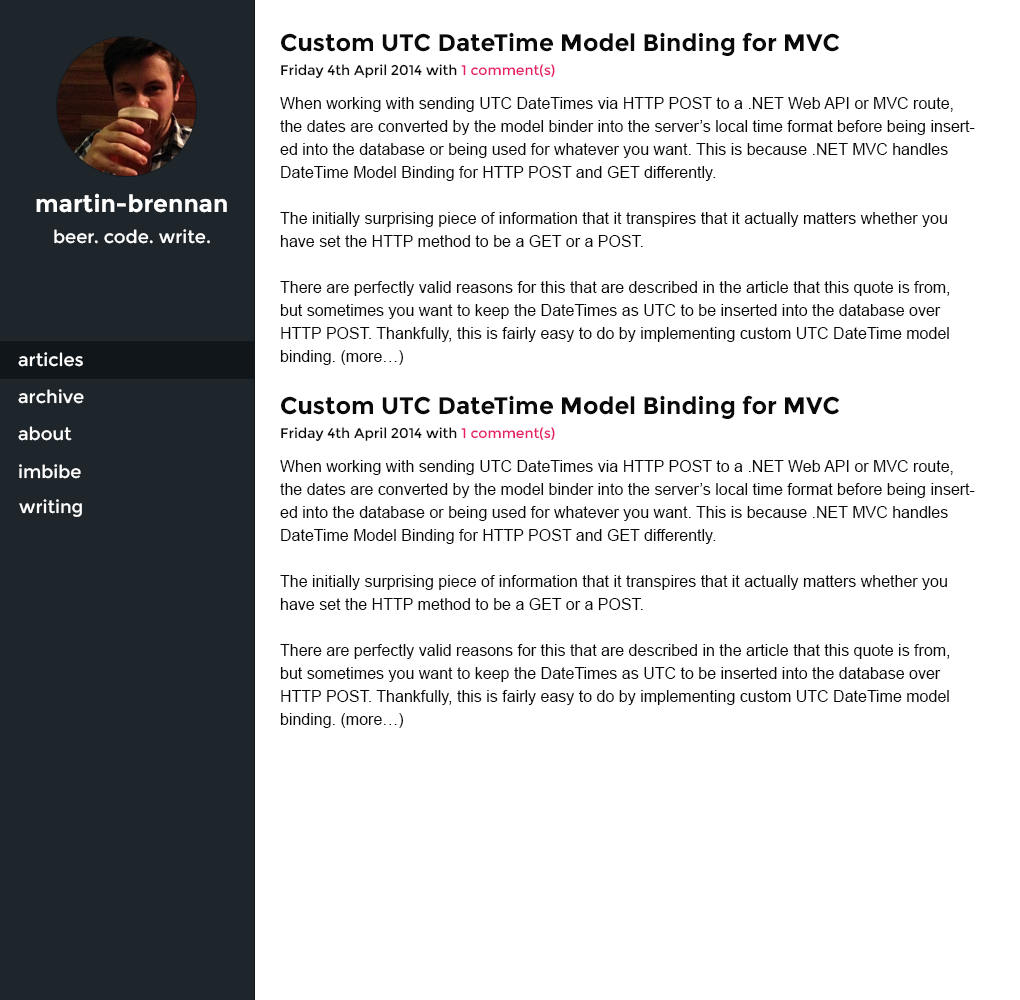
<style>
.page{position:relative;width:1020px;height:1000px;background:#ffffff}
.page>*{position:absolute;margin:0}
.t1{font:24px "Montserrat-Bold";color:#0a0a0a}
.t2{font:14px "Montserrat-Regular";color:#0a0a0a}
.t3{font:14px "Montserrat-Regular";color:#e52066}
.t4{font:16px/23px "ArialMT";color:#0a0a0a}
.t5{font:24px "Montserrat-Bold";color:#ffffff}
.t6{font:18px "Montserrat-Regular";color:#ffffff}
</style>
<div class="page">
<p class="t1" style="left:281px;top:32px;width:559px;height:24px">Custom UTC DateTime Model Binding for MVC</p>
<p class="t2" style="left:281px;top:64px;width:274px;height:15px">Friday 4th April 2014 with <span class="t3">1 comment(s)</span></p>
<p class="t4" style="left:280px;top:97px;width:695px;height:268px">When working with sending UTC DateTimes via HTTP POST to a .NET Web API or MVC route, the dates are converted by the model binder into the server’s local time format before being inserted into the database or being used for whatever you want. This is because .NET MVC handles DateTime Model Binding for HTTP POST and GET differently.<br><br>The initially surprising piece of information that it transpires that it actually matters whether you have set the HTTP method to be a GET or a POST.<br><br>There are perfectly valid reasons for this that are described in the article that this quote is from, but sometimes you want to keep the DateTimes as UTC to be inserted into the database over HTTP POST. Thankfully, this is fairly easy to do by implementing custom UTC DateTime model binding. (more…)</p>
<p class="t5" style="left:36px;top:193px;width:191px;height:20px">martin-brennan</p>
<p class="t6" style="left:54px;top:229px;width:156px;height:15px">beer. code. write.</p>
<p class="t6" style="left:18px;top:352px;width:65px;height:15px">articles</p>
<p class="t6" style="left:18px;top:389px;width:66px;height:15px">archive</p>
<p class="t1" style="left:281px;top:395px;width:559px;height:24px">Custom UTC DateTime Model Binding for MVC</p>
<p class="t6" style="left:18px;top:426px;width:54px;height:15px">about</p>
<p class="t2" style="left:281px;top:427px;width:274px;height:15px">Friday 4th April 2014 with <span class="t3">1 comment(s)</span></p>
<p class="t4" style="left:280px;top:460px;width:695px;height:268px">When working with sending UTC DateTimes via HTTP POST to a .NET Web API or MVC route, the dates are converted by the model binder into the server’s local time format before being inserted into the database or being used for whatever you want. This is because .NET MVC handles DateTime Model Binding for HTTP POST and GET differently.<br><br>The initially surprising piece of information that it transpires that it actually matters whether you have set the HTTP method to be a GET or a POST.<br><br>There are perfectly valid reasons for this that are described in the article that this quote is from, but sometimes you want to keep the DateTimes as UTC to be inserted into the database over HTTP POST. Thankfully, this is fairly easy to do by implementing custom UTC DateTime model binding. (more…)</p>
<p class="t6" style="left:19px;top:464px;width:62px;height:15px">imbibe</p>
<p class="t6" style="left:19px;top:499px;width:63px;height:18px">writing</p>
</div>
